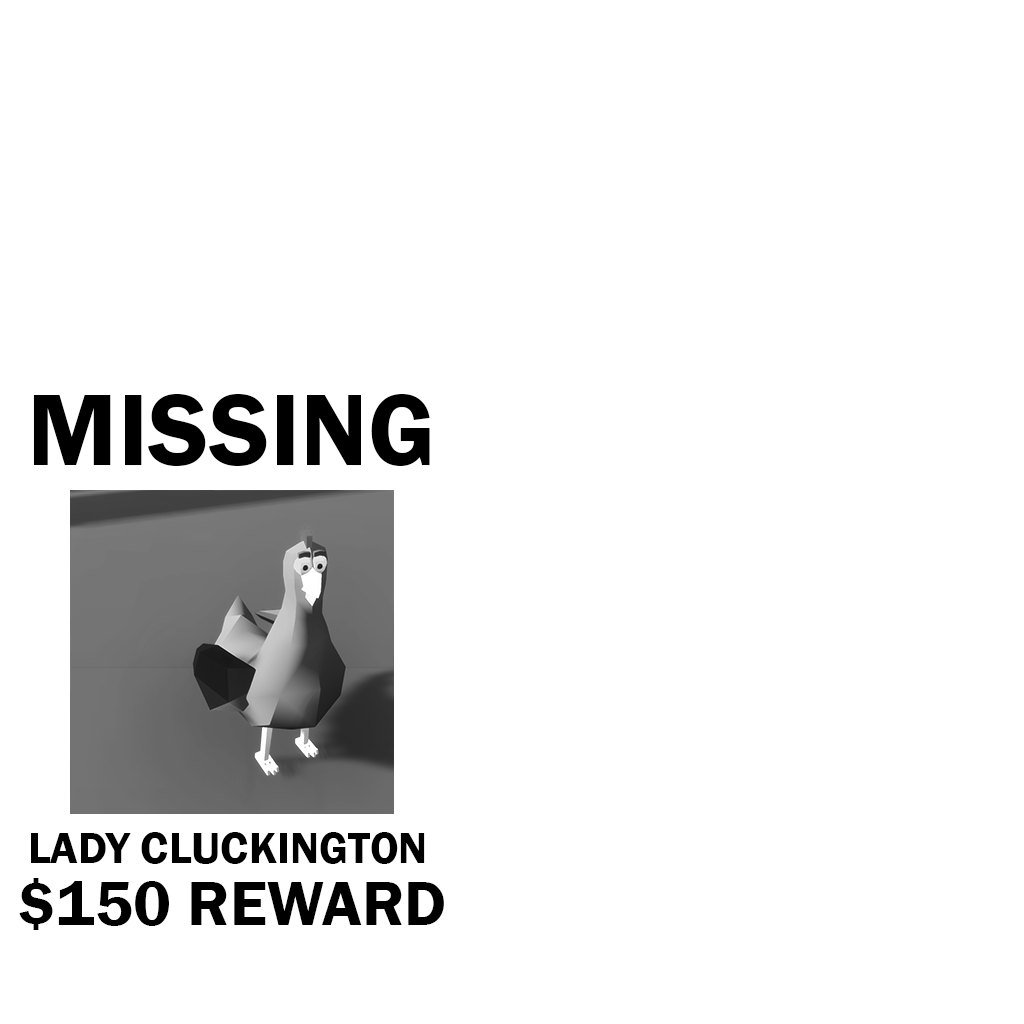
<style>
.page{position:relative;width:1024px;height:1024px;background:#ffffff}
.page>*{position:absolute;margin:0}
.t1{font:105px "FranklinGothic-Demi";color:#000000}
.t2{font:45px "FranklinGothic-Demi";color:#000000}
.t3{font:65px "FranklinGothic-Demi";color:#000000}
</style>
<div class="page">
<p class="t1" style="left:33px;top:394px;width:397px;height:72px">MISSING</p>
<p class="t2" style="left:31px;top:832px;width:394px;height:32px">LADY CLUCKINGTON</p>
<p class="t3" style="left:19px;top:878px;width:425px;height:52px">$150 REWARD</p>
</div>
